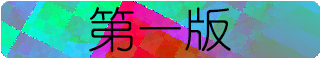
<style>
.page{position:relative;width:320px;height:60px}
.page>*{position:absolute;margin:0}
.t1{font:48px "YouYuan";color:#000000}
</style>
<div class="page">
<p class="t1" style="left:89px;top:6px;width:142px;height:47px">第一版</p>
</div>
